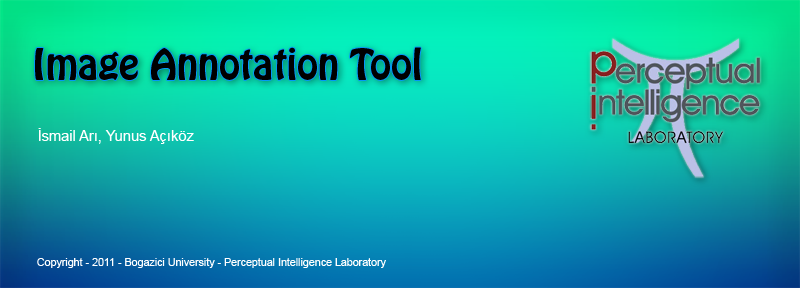
<style>
.page{position:relative;width:800px;height:288px}
.page>*{position:absolute;margin:0}
.t1{font:38.1px "HoboStd";color:#000000}
.t2{font:14.7px "ArialMT";color:#ffffff}
.t3{font:10.7px "ArialMT";color:#ffffff}
</style>
<div class="page">
<p class="t1" style="left:35px;top:47px;width:386px;height:33px">Image Annotation Tool</p>
<p class="t2" style="left:38px;top:128px;width:156px;height:16px">İsmail Arı, Yunus Açıköz</p>
<p class="t3" style="left:37px;top:258px;width:349px;height:10px">Copyright - 2011 - Bogazici University - Perceptual Intelligence Laboratory</p>
</div>
